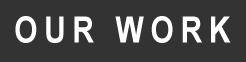
<style>
.page{position:relative;width:246px;height:62px;background:#333333}
.page>*{position:absolute;margin:0}
.t1{font:36.3px "Arial-BoldMT";letter-spacing:0.22em;color:#ffffff;scale:0.83 1}
</style>
<div class="page">
<p class="t1" style="left:15px;top:16px;width:216px;height:27px">OUR WORK</p>
</div>
